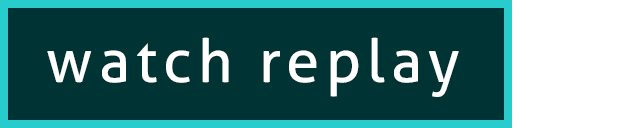
<style>
.page{position:relative;width:640px;height:128px;background:#003333}
.page>*{position:absolute;margin:0}
.t1{font:60px "Aller-Regular";letter-spacing:0.1em;color:#ffffff}
</style>
<div class="page">
<p class="t1" style="left:47px;top:37px;width:412px;height:60px">watch replay</p>
</div>
